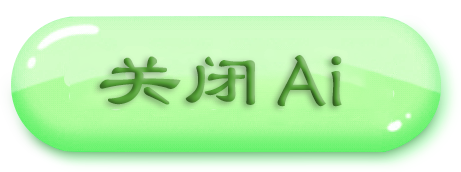
<style>
.page{position:relative;width:461px;height:172px}
.page>*{position:absolute;margin:0}
.t1{font:78.4px "LiSu";scale:1.07 1}
.t2{font:72px "STXinwei";scale:1.07 1}
</style>
<div class="page">
<p class="t1" style="left:99px;top:56px;width:157px;height:49px">关闭</p>
<p class="t2" style="left:277px;top:55px;width:65px;height:52px">Ai</p>
</div>
